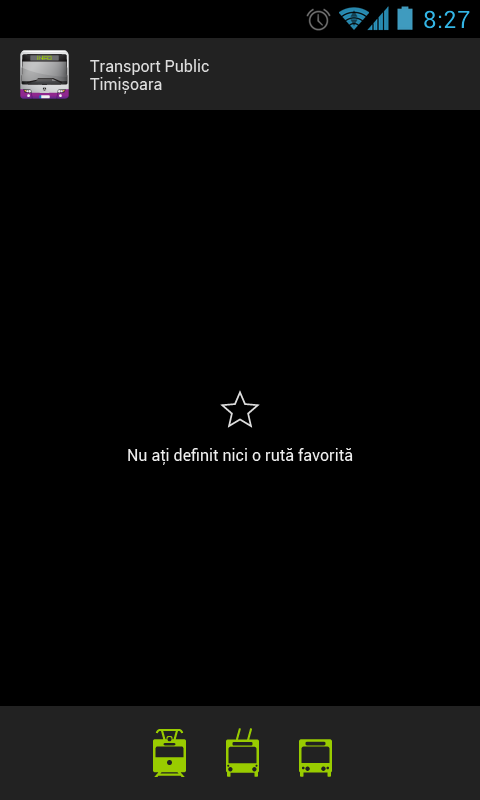
<style>
.page{position:relative;width:480px;height:800px;background:#000000}
.page>*{position:absolute;margin:0}
.t1{font:16px/18px "Roboto-Regular";color:#dddddd}
.t2{font:16px "Roboto-Regular";color:#eeeeee}
</style>
<div class="page">
<p class="t1" style="left:90px;top:59px;width:119px;height:35px">Transport Public<br>Timișoara</p>
<p class="t2" style="left:128px;top:448px;width:225px;height:17px">Nu aţi definit nici o rută favorită</p>
</div>
